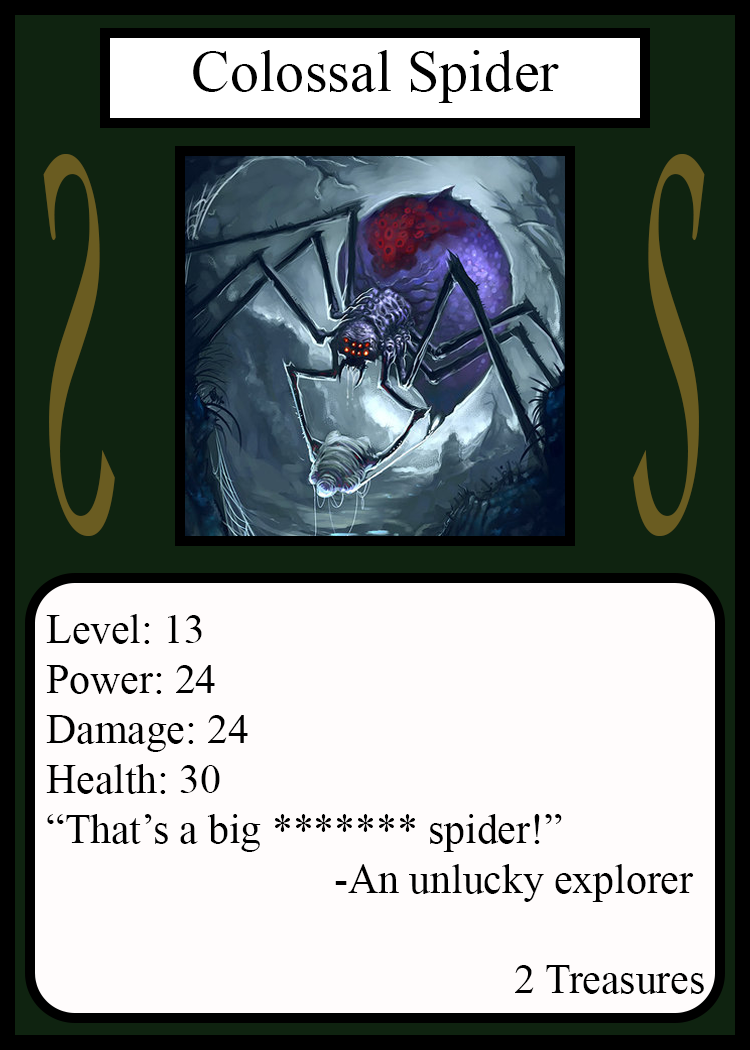
<style>
.page{position:relative;width:750px;height:1050px;background:#fffcfc}
.page>*{position:absolute;margin:0}
.t1{font:58.3px "TimesNewRomanPSMT";color:#010101}
.t2{font:548.5px "Apple-Chancery";color:#6a5c21;scale:0.27 1}
.t3{font:548.2px "Apple-Chancery";color:#6a5c21;scale:0.27 1}
.t4{font:41.7px "TimesNewRomanPSMT";color:#000000}
</style>
<div class="page">
<p class="t1" style="left:193px;top:50px;width:366px;height:53px">Colossal Spider</p>
<p class="t2" style="left:43px;top:154px;width:72px;height:382px;rotate:180deg">S</p>
<p class="t3" style="left:633px;top:154px;width:72px;height:382px">S</p>
<p class="t4" style="left:46px;top:614px;width:658px;height:380px">Level: 13<br>Power: 24<br>Damage: 24<br>Health: 30<br>“That’s a big ******* spider!”<br>        -An unlucky explorer<br><br>             2 Treasures</p>
</div>
